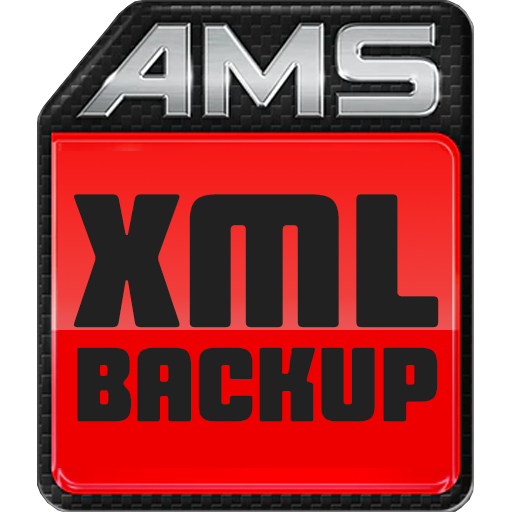
<style>
.page{position:relative;width:512px;height:512px;background:#212121}
.page>*{position:absolute;margin:0}
.t1{font:204px "A2ZLanciaVARA2ZLanciaVAR-CompressedBlack";letter-spacing:-0.01em;color:#212121;font-weight:bold}
.t2{font:113px "A2ZLanciaVARA2ZLanciaVAR-CompressedBlack";letter-spacing:-0.02em;color:#212121;font-weight:bold}
</style>
<div class="page">
<p class="t1" style="left:74px;top:194px;width:365px;height:134px">XML</p>
<p class="t2" style="left:77px;top:347px;width:361px;height:75px">BACKUP</p>
</div>
